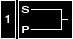
<style>
.page{position:relative;width:73px;height:39px;background:#000000}
.page>*{position:absolute;margin:0}
.t1{font:10px/20px "HelveticaMedium";color:#ffffff;text-transform:uppercase;scale:1.3 1}
.t2{font:11.5px "HelveticaMedium";letter-spacing:-0.075em;color:#ffffff;text-transform:uppercase;scale:1.04 1}
</style>
<div class="page">
<p class="t1" style="left:21px;top:6px;width:9px;height:27px;text-align:center">S<br>P</p>
<p class="t2" style="left:5px;top:15px;width:5px;height:8px">1</p>
</div>
